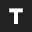
<style>
.page{position:relative;width:32px;height:32px;background:#222222}
.page>*{position:absolute;margin:0}
.t1{font:22px "Novecentowide-Bold";letter-spacing:0.015em;color:#ffffff;text-transform:uppercase}
</style>
<div class="page">
<p class="t1" style="left:9px;top:8px;width:14px;height:16px">T</p>
</div>
